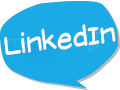
<style>
.page{position:relative;width:120px;height:90px;background:#1aaae5}
.page>*{position:absolute;margin:0}
.t1{font:28px "SuplexmentaryComicNC";color:#ffffff}
</style>
<div class="page">
<p class="t1" style="left:4px;top:24px;width:112px;height:31px;rotate:-7deg">LinkedIn</p>
</div>
